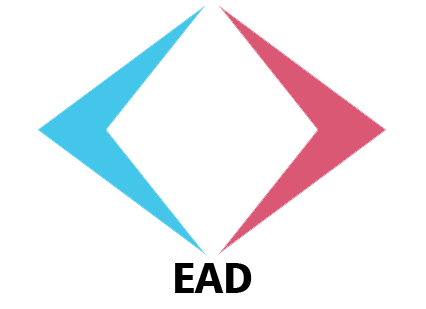
<style>
.page{position:relative;width:426px;height:309px;background:#ffffff}
.page>*{position:absolute;margin:0}
.t1{font:43.4px "Humanist777BT-BlackCondensedB";color:#000000;scale:1.06 1}
</style>
<div class="page">
<p class="t1" style="left:175px;top:263px;width:77px;height:30px">EAD</p>
</div>
